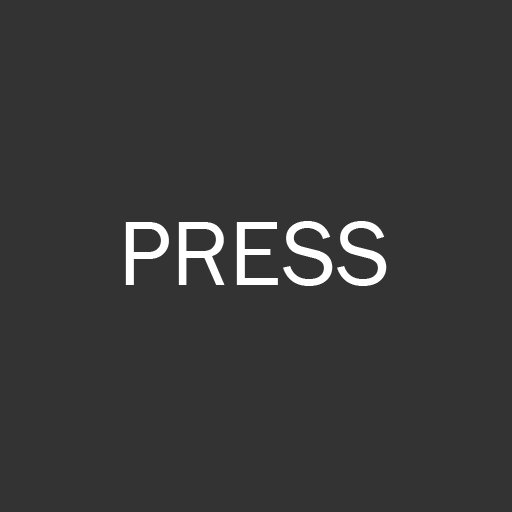
<style>
.page{position:relative;width:512px;height:512px;background:#333333}
.page>*{position:absolute;margin:0}
.t1{font:95px "FranklinGothic-Book";color:#ffffff}
</style>
<div class="page">
<p class="t1" style="left:125px;top:221px;width:262px;height:65px">PRESS</p>
</div>
